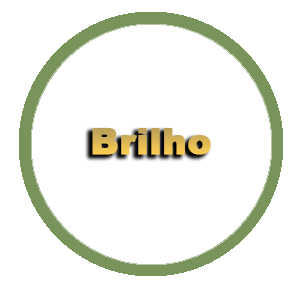
<style>
.page{position:relative;width:300px;height:300px;background:#ffffff}
.page>*{position:absolute;margin:0}
.t1{font:36px "Arial-Black";color:#d7ad43;font-weight:bold}
</style>
<div class="page">
<p class="t1" style="left:92px;top:128px;width:119px;height:27px">Brilho</p>
</div>
